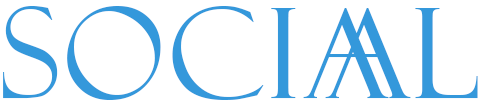
<style>
.page{position:relative;width:482px;height:108px;background:#ffffff}
.page>*{position:absolute;margin:0}
.t1{font:125px "FelixTitlingMT";letter-spacing:0.025em;color:#3498db}
.t2{font:125px "FelixTitlingMT";letter-spacing:-0.51em;color:#3498db}
</style>
<div class="page">
<p class="t1" style="left:3px;top:6px;width:475px;height:94px">SOCI<span class="t2">A</span>AL</p>
</div>
